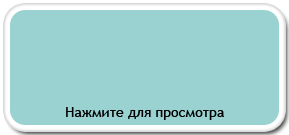
<style>
.page{position:relative;width:289px;height:135px;background:#9ad2d2}
.page>*{position:absolute;margin:0}
.t1{font:14px "TrebuchetMS";color:#010101}
</style>
<div class="page">
<p class="t1" style="left:66px;top:107px;width:158px;height:13px">Нажмите для просмотра</p>
</div>
